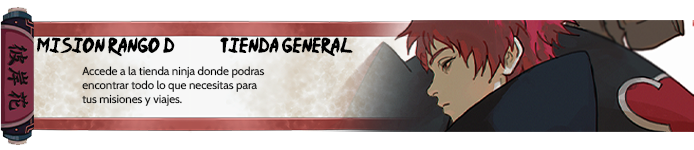
<style>
.page{position:relative;width:694px;height:150px;background:#ffffff}
.page>*{position:absolute;margin:0}
.t1{font:17.2px "Ninja-Naruto";color:#000000}
.t2{font:11.5px "Cabin-Regular";color:#000000}
</style>
<div class="page">
<p class="t1" style="left:37px;top:37px;width:316px;height:20px">Mision Rango D              Tienda General</p>
<p class="t2" style="left:82px;top:66px;width:183px;height:40px">Accede a la tienda ninja donde podras<br>encontrar todo lo que necesitas para<br>tus misiones y viajes.</p>
</div>
